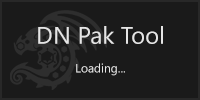
<style>
.page{position:relative;width:200px;height:100px;background:#1a1a1a}
.page>*{position:absolute;margin:0}
.t1{font:24px "SegoeUI";color:#e5e5e5}
.t2{font:12px "SegoeUI";color:#e5e5e5}
</style>
<div class="page">
<p class="t1" style="left:38px;top:26px;width:125px;height:50px;text-align:center">DN Pak Tool<br><span class="t2"><br>Loading...</span></p>
</div>
